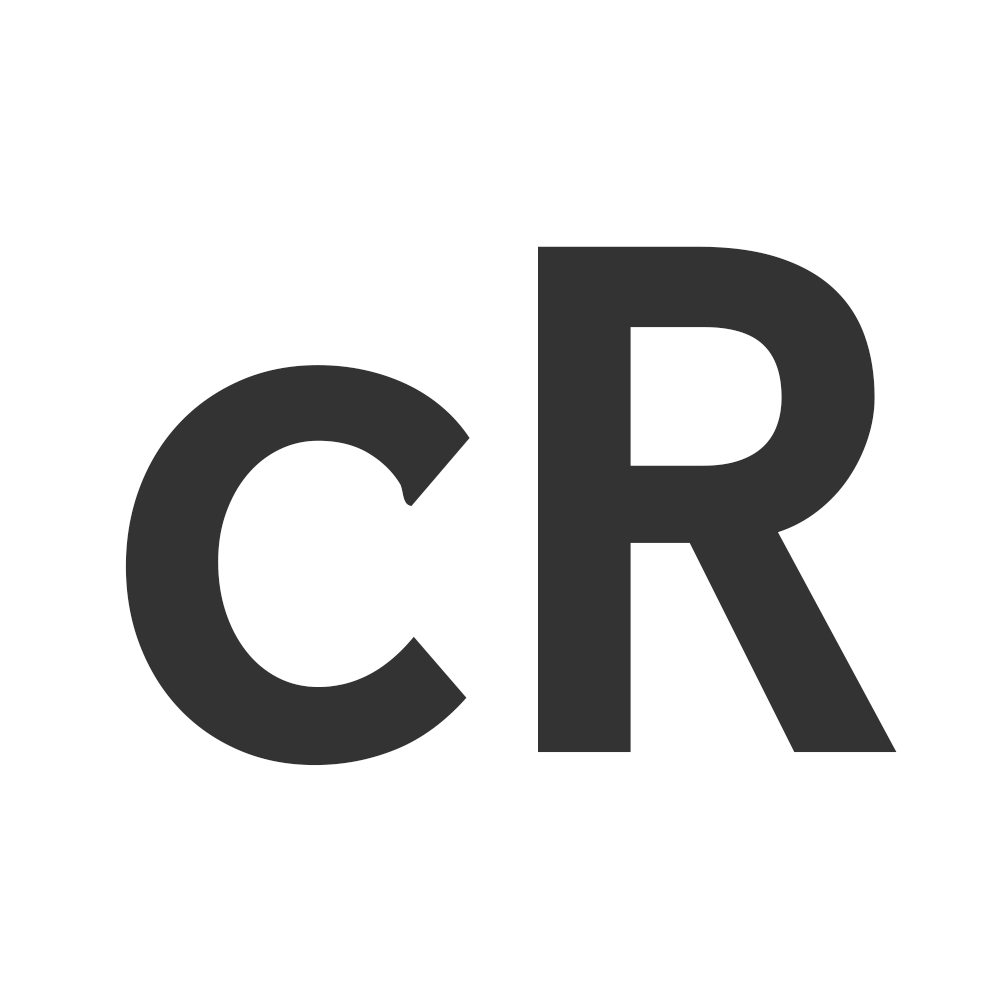
<style>
.page{position:relative;width:1000px;height:1000px;background:#ffffff}
.page>*{position:absolute;margin:0}
.t1{font:810.8px "Inconsolata-Bold";color:#333333}
</style>
<div class="page">
<p class="t1" style="left:125px;top:246px;width:772px;height:520px">cR</p>
</div>
